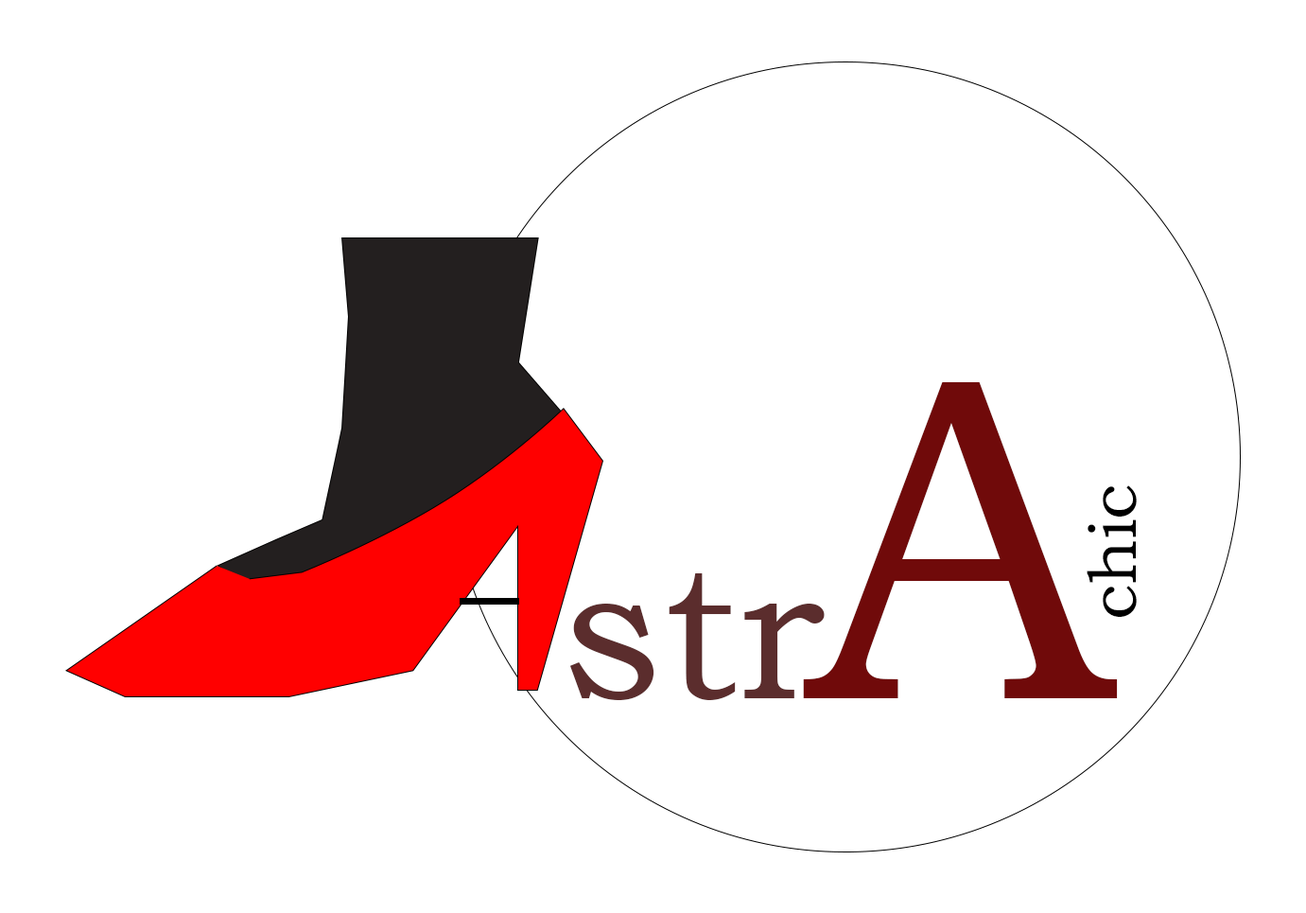
<style>
.page{position:relative;width:1306px;height:913px;background:#ffffff}
.page>*{position:absolute;margin:0}
.t1{font:463.2px "BookmanOldStyle";color:#700a0a}
.t2{font:68.1px "BookmanOldStyle";color:#000000}
.t3{font:196.4px "BookmanOldStyle";color:#5b2d2d}
</style>
<div class="page">
<p class="t1" style="left:803px;top:382px;width:315px;height:316px">A</p>
<p class="t2" style="left:1087px;top:485px;width:50px;height:132px;rotate:-90deg">chic</p>
<p class="t3" style="left:569px;top:573px;width:256px;height:127px">str</p>
</div>
